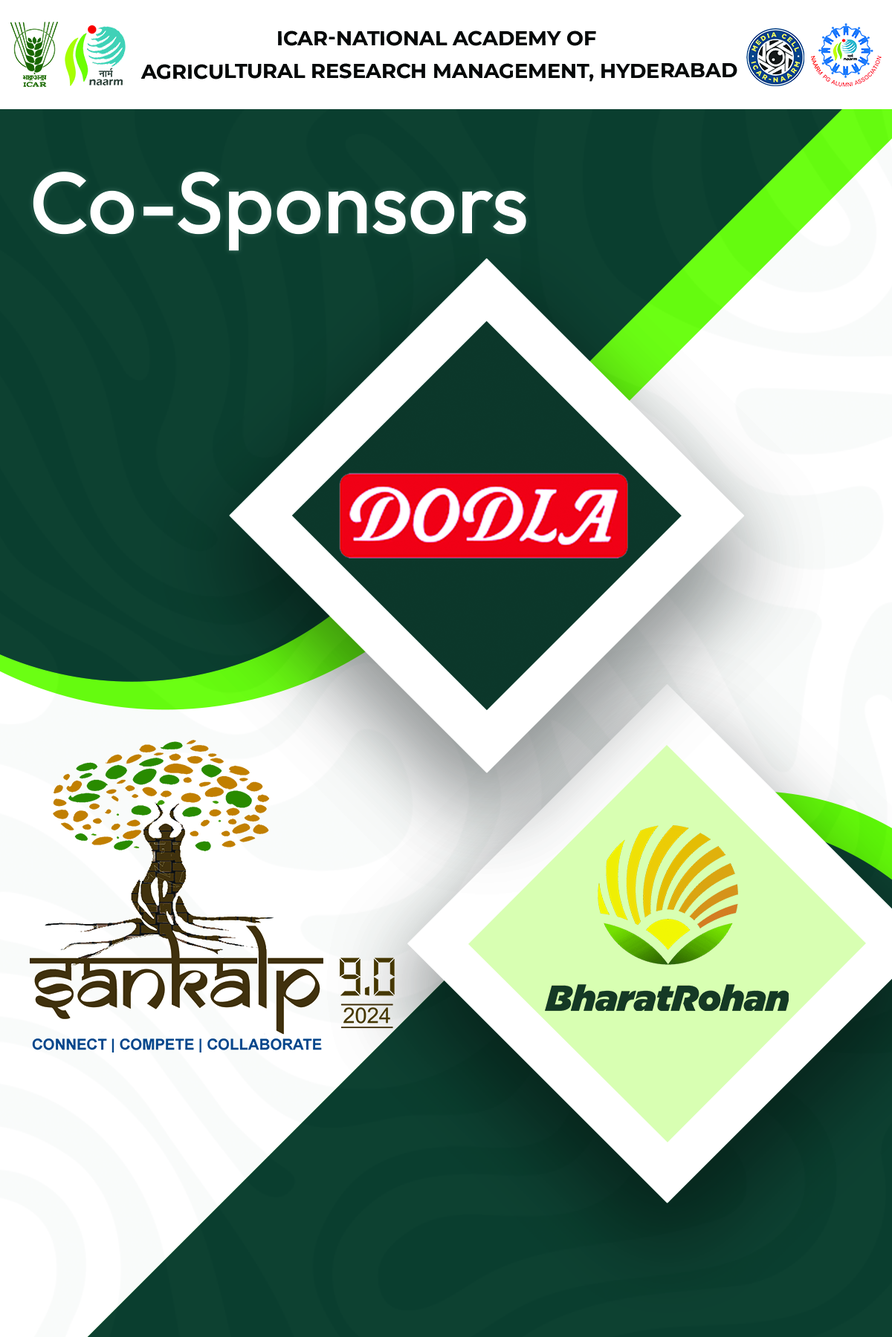
<style>
.page{position:relative;width:892px;height:1337px;background:#ffffff}
.page>*{position:absolute;margin:0}
.t1{font:20.1px/32.7px "Montserrat-Bold";color:#070909;text-transform:uppercase}
.t2{font:20.1px/32.7px "Montserrat-Bold";color:#060808;text-transform:uppercase}
.t3{font:86.7px "Outfit-Medium";color:#ffffff}
</style>
<div class="page">
<p class="t1" style="left:140px;top:30px;width:597px;height:52px;text-align:center"><span class="t2">IC</span>AR-National Academy of <br>Agricultural Research Management, HYDERABAD</p>
<p class="t3" style="left:33px;top:172px;width:493px;height:79px">Co-Sponsors</p>
</div>
